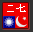
<style>
.page{position:relative;width:33px;height:32px;background:#f20000}
.page>*{position:absolute;margin:0}
.t1{font:10.4px "SimSun";color:#ffffff}
</style>
<div class="page">
<p class="t1" style="left:7px;top:4px;width:19px;height:8px">二七</p>
</div>
